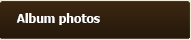
<style>
.page{position:relative;width:191px;height:40px}
.page>*{position:absolute;margin:0}
.t1{font:12px "Tahoma-Bold";color:#ffffff}
</style>
<div class="page">
<p class="t1" style="left:16px;top:13px;width:84px;height:12px">Album photos</p>
</div>
